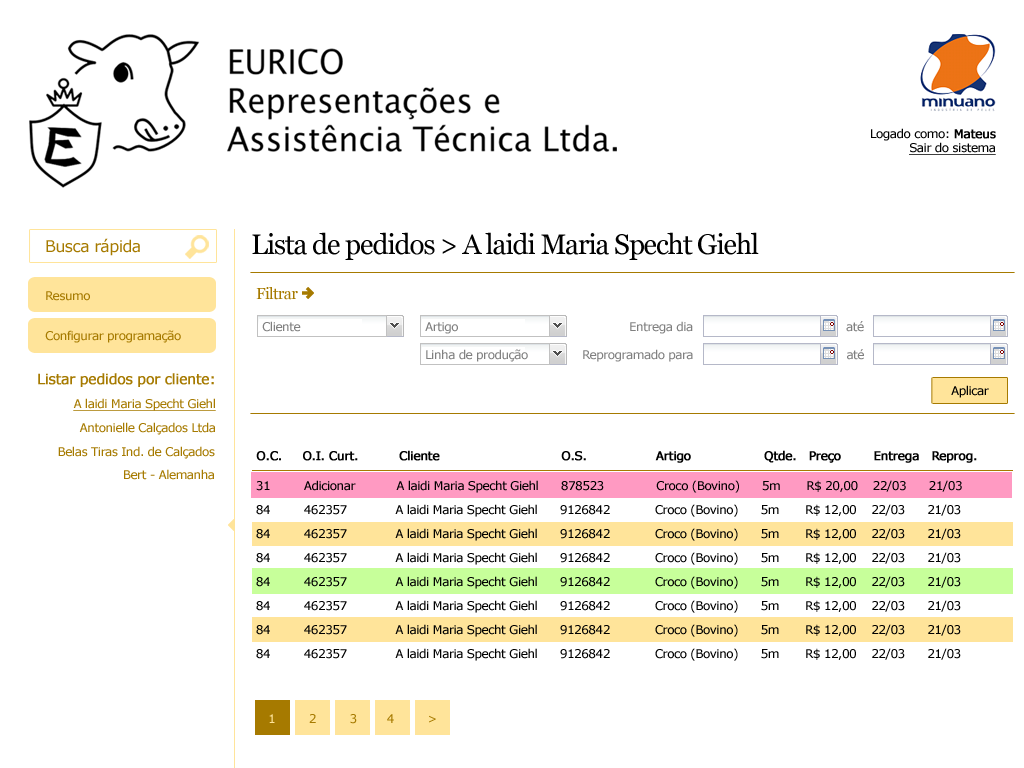
<style>
.page{position:relative;width:1024px;height:768px;background:#ffffff}
.page>*{position:absolute;margin:0}
.t1{font:12px "Verdana";letter-spacing:-0.04em;color:#000000;text-decoration:underline}
.t2{font:12px "Verdana";letter-spacing:-0.04em;color:#000000}
.t3{font:12px "Verdana";letter-spacing:-0.04em;color:#000000;font-weight:bold}
.t4{font:28px "Georgia";letter-spacing:-0.04em;color:#000000}
.t5{font:16px "Verdana";letter-spacing:-0.04em;color:#a67a00}
.t6{font:12px/11px "Verdana";letter-spacing:-0.04em;color:#a67a00}
.t7{font:12px "Verdana";letter-spacing:-0.04em;color:#a67a00}
.t8{font:16px "Georgia";letter-spacing:-0.04em;color:#a67a00}
.t9{font:12px "Verdana";letter-spacing:-0.04em;color:#808080}
.t10{font:14px "Verdana";letter-spacing:-0.04em;color:#a67a00;font-weight:bold}
.t11{font:12px "Verdana";letter-spacing:-0.04em;color:#a67a00;text-decoration:underline}
.t12{font:12px/24px "Verdana";letter-spacing:-0.04em;color:#000000}
.t13{font:12px/24px "Verdana";letter-spacing:-0.04em;color:#000000;font-weight:bold}
.t14{font:12px/30px "Verdana";letter-spacing:-0.04em;color:#000000}
.t15{font:12px "Verdana";letter-spacing:-0.04em;color:#ffe49a}
</style>
<div class="page">
<p class="t1" style="left:871px;top:128px;width:125px;height:27px;text-align:right"><span class="t2">Logado como: </span><span class="t3">Mateus<br></span>Sair do sistema</p>
<p class="t4" style="left:252px;top:232px;width:507px;height:28px">Lista de pedidos &gt; A laidi Maria Specht Giehl</p>
<p class="t5" style="left:46px;top:238px;width:94px;height:18px">Busca rápida</p>
<p class="t6" style="left:45px;top:291px;width:136px;height:52px"><span class="t7">Resumo<br><br><br></span>Configurar programação</p>
<p class="t8" style="left:256px;top:287px;width:42px;height:13px">Filtrar</p>
<p class="t9" style="left:262px;top:321px;width:39px;height:11px">Cliente</p>
<p class="t9" style="left:425px;top:322px;width:33px;height:12px">Artigo</p>
<p class="t9" style="left:630px;top:321px;width:234px;height:13px">Entrega dia                                         até</p>
<p class="t9" style="left:426px;top:349px;width:102px;height:13px">Linha de produção</p>
<p class="t9" style="left:583px;top:349px;width:281px;height:13px">Reprogramado para                                         até</p>
<p class="t10" style="left:38px;top:373px;width:176px;height:14px">Listar pedidos por cliente:</p>
<p class="t2" style="left:951px;top:385px;width:38px;height:13px">Aplicar</p>
<p class="t11" style="left:73px;top:398px;width:143px;height:13px">A laidi Maria Specht Giehl</p>
<p class="t7" style="left:79px;top:422px;width:136px;height:13px">Antonielle Calçados Ltda</p>
<p class="t7" style="left:58px;top:446px;width:157px;height:13px">Belas Tiras Ind. de Calçados</p>
<p class="t12" style="left:256px;top:450px;width:721px;height:211px"><span class="t13"> O.C.     O.I. Curt.          Cliente                              O.S.                 Artigo                  Qtde.   Preço        Entrega   Reprog.<br></span><span class="t14"> 31         Adicionar           A laidi Maria Specht Giehl      878523              Croco (Bovino)      5m       R$ 20,00    22/03      21/03<br></span> 84         462357             A laidi Maria Specht Giehl      9126842            Croco (Bovino)      5m       R$ 12,00    22/03      21/03<br> 84         462357             A laidi Maria Specht Giehl      9126842            Croco (Bovino)      5m       R$ 12,00    22/03      21/03<br> 84         462357             A laidi Maria Specht Giehl      9126842            Croco (Bovino)      5m       R$ 12,00    22/03      21/03<br> 84         462357             A laidi Maria Specht Giehl      9126842            Croco (Bovino)      5m       R$ 12,00    22/03      21/03<br> 84         462357             A laidi Maria Specht Giehl      9126842            Croco (Bovino)      5m       R$ 12,00    22/03      21/03<br> 84         462357             A laidi Maria Specht Giehl      9126842            Croco (Bovino)      5m       R$ 12,00    22/03      21/03<br> 84         462357             A laidi Maria Specht Giehl      9126842            Croco (Bovino)      5m       R$ 12,00    22/03      21/03</p>
<p class="t7" style="left:124px;top:469px;width:90px;height:11px">Bert - Alemanha</p>
<p class="t7" style="left:269px;top:714px;width:167px;height:10px"><span class="t15">1      </span>   2         3        4         &gt;</p>
</div>
